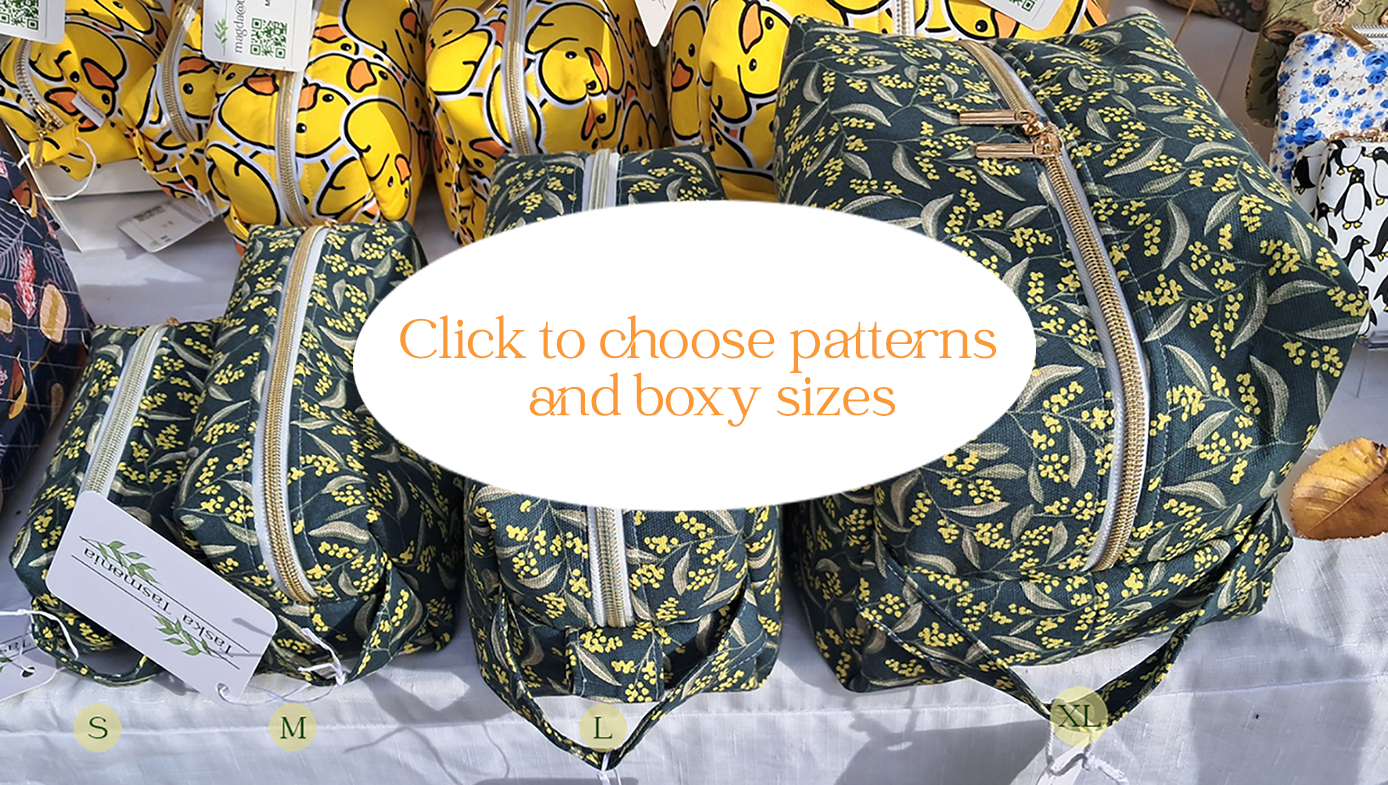
<style>
.page{position:relative;width:1388px;height:785px}
.page>*{position:absolute;margin:0}
.t1{font:60px "CatchyMager-Normal";color:#fb9936}
</style>
<div class="page">
<p class="t1" style="left:400px;top:315px;width:596px;height:58px">Click to choose patterns</p>
<p class="t1" style="left:529px;top:372px;width:366px;height:55px">and boxy sizes</p>
</div>
